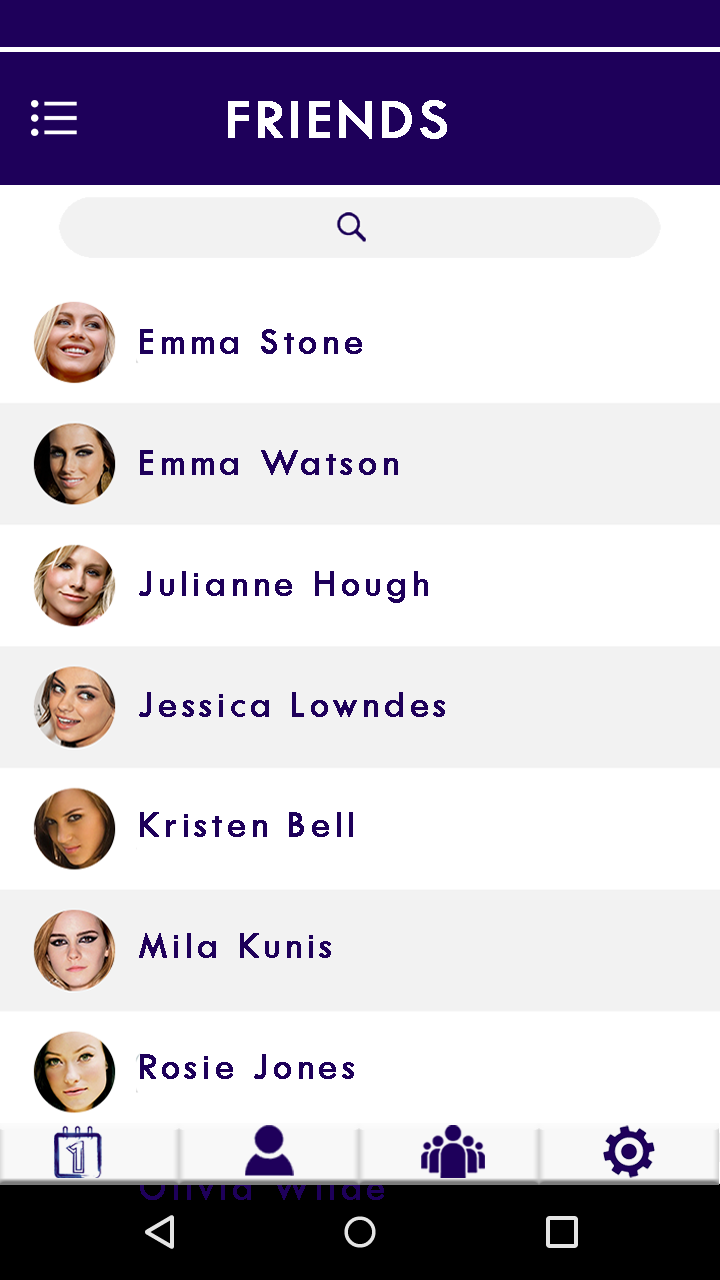
<style>
.page{position:relative;width:720px;height:1280px;background:#ffffff}
.page>*{position:absolute;margin:0}
.t1{font:58.3px "TwCenMT-Regular";letter-spacing:0.05em;color:#ffffff;text-transform:uppercase;font-weight:bold}
.t2{font:37.5px/120.8px "TwCenMT-Regular";letter-spacing:0.1em;color:#1e005a;font-weight:bold}
</style>
<div class="page">
<p class="t1" style="left:228px;top:100px;width:219px;height:39px">Friends</p>
<p class="t2" style="left:139px;top:329px;width:306px;height:871px">Emma Stone<br>Emma Watson<br>Julianne Hough<br>Jessica Lowndes<br>Kristen Bell<br>Mila Kunis<br>Rosie Jones<br>Olivia Wilde</p>
</div>
